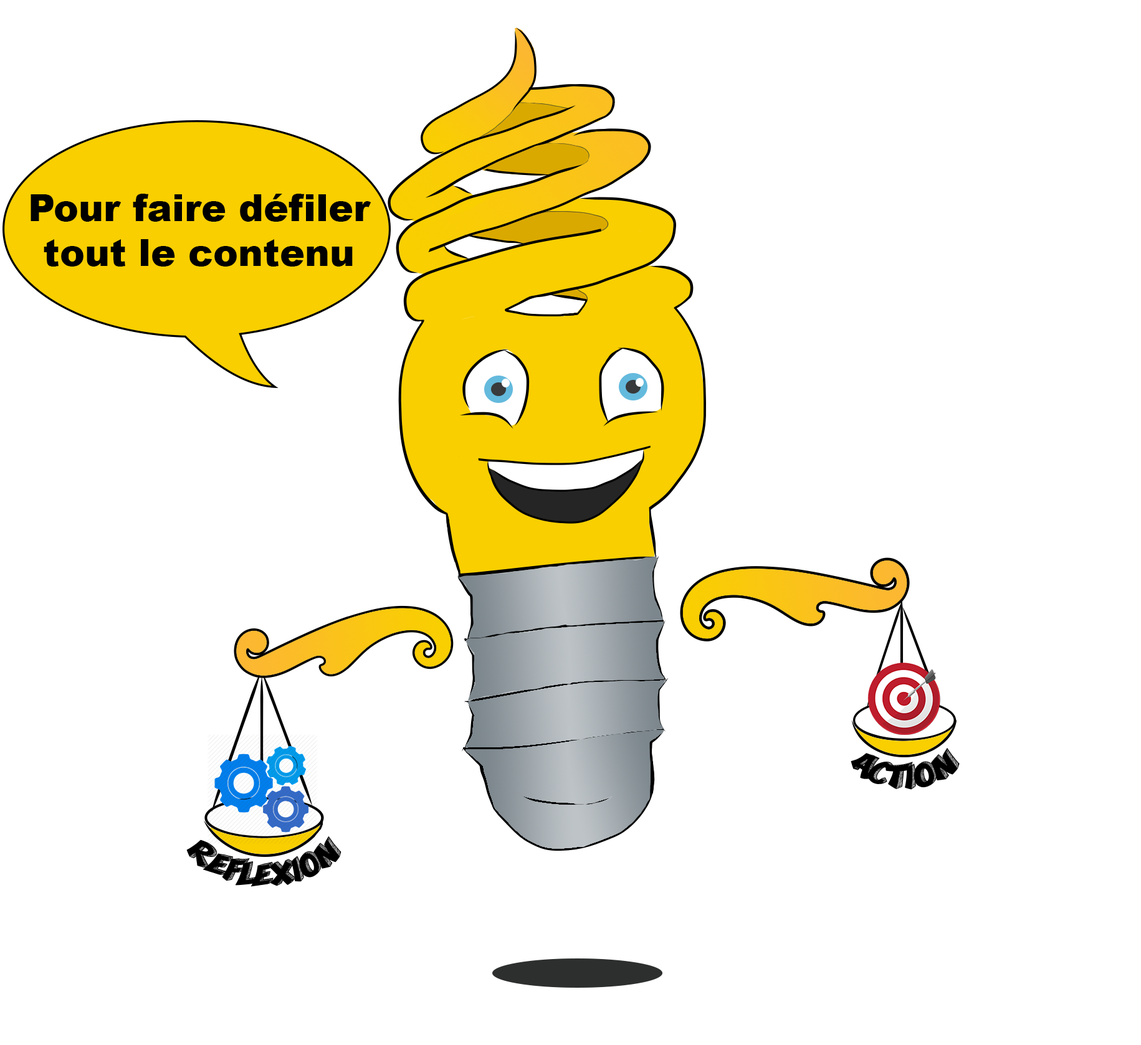
<style>
.page{position:relative;width:1141px;height:1045px;background:#ffffff}
.page>*{position:absolute;margin:0}
.t1{font:37.4px "Arial-Black";color:#000000}
.t2{font:29.9px "MonaShark";color:#000000}
</style>
<div class="page">
<p class="t1" style="left:31px;top:194px;width:340px;height:73px;text-align:center">Pour faire défiler <br>tout le contenu</p>
<p class="t2" style="left:850px;top:748px;width:109px;height:42px">Action</p>
<p class="t2" style="left:186px;top:836px;width:155px;height:51px;text-align:center">REFLEXION</p>
</div>
